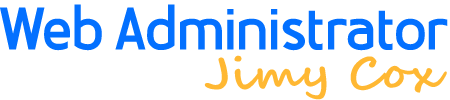
<style>
.page{position:relative;width:450px;height:100px;background:#ffffff}
.page>*{position:absolute;margin:0}
.t1{font:55px "Bloomsburg";color:#0370ff}
.t2{font:46px "SegoeScript-Bold";color:#0370ff}
.t3{font:44.5px "SegoeScript-Bold";color:#ffb833;scale:1.04 1}
</style>
<div class="page">
<p class="t1" style="left:0px;top:4px;width:448px;height:47px"><span class="t2"><br></span>Web Administrator</p>
<p class="t3" style="left:204px;top:55px;width:243px;height:45px">Jimy Cox</p>
</div>
